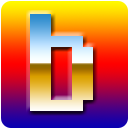
<style>
.page{position:relative;width:128px;height:128px}
.page>*{position:absolute;margin:0}
.t1{font:137.4px "Fixedsys"}
</style>
<div class="page">
<p class="t1" style="left:30px;top:14px;width:63px;height:97px">b</p>
</div>
